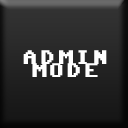
<style>
.page{position:relative;width:128px;height:128px}
.page>*{position:absolute;margin:0}
.t1{font:20px "Commodore-64-Pixelized";letter-spacing:0.1em;color:#ffffff;text-transform:uppercase}
</style>
<div class="page">
<p class="t1" style="left:23px;top:50px;width:84px;height:27px;text-align:center">admin<br>mode</p>
</div>
